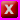
<style>
.page{position:relative;width:20px;height:20px;background:#ff00ff}
.page>*{position:absolute;margin:0}
.t1{font:18px "Arial-BoldMT";letter-spacing:0.2em;color:#cdcbcb}
</style>
<div class="page">
<p class="t1" style="left:4px;top:4px;width:10px;height:10px">x</p>
<p class="t1" style="left:4px;top:4px;width:10px;height:10px">x</p>
</div>
